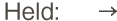
<style>
.page{position:relative;width:117px;height:21px;background:#ffffff}
.page>*{position:absolute;margin:0}
.t1{font:22px "GothicMB101Pro-Regular";color:#4c4843}
</style>
<div class="page">
<p class="t1" style="left:5px;top:2px;width:53px;height:19px">Held:</p>
</div>
